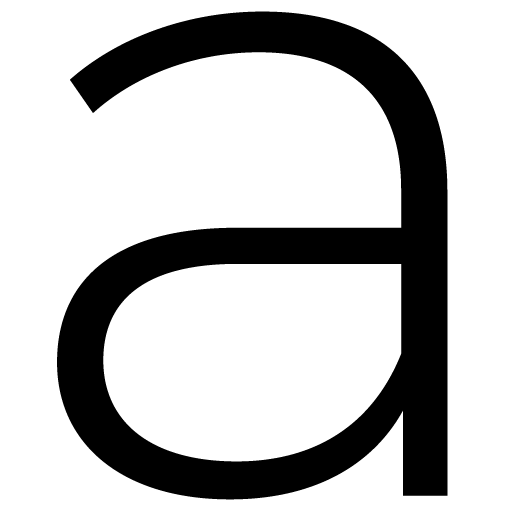
<style>
.page{position:relative;width:512px;height:512px;background:#ffffff}
.page>*{position:absolute;margin:0}
.t1{font:920px "Montserrat-Light";color:#000000}
</style>
<div class="page">
<p class="t1" style="left:57px;top:11px;width:391px;height:489px">a</p>
</div>
